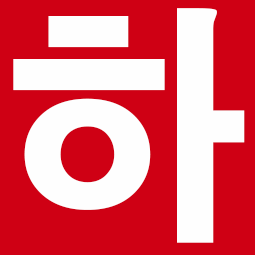
<style>
.page{position:relative;width:255px;height:255px;background:#cf0014}
.page>*{position:absolute;margin:0}
.t1{font:250px "H2gtrE";color:#fefefe}
</style>
<div class="page">
<p class="t1" style="left:13px;top:8px;width:232px;height:235px">하</p>
</div>
